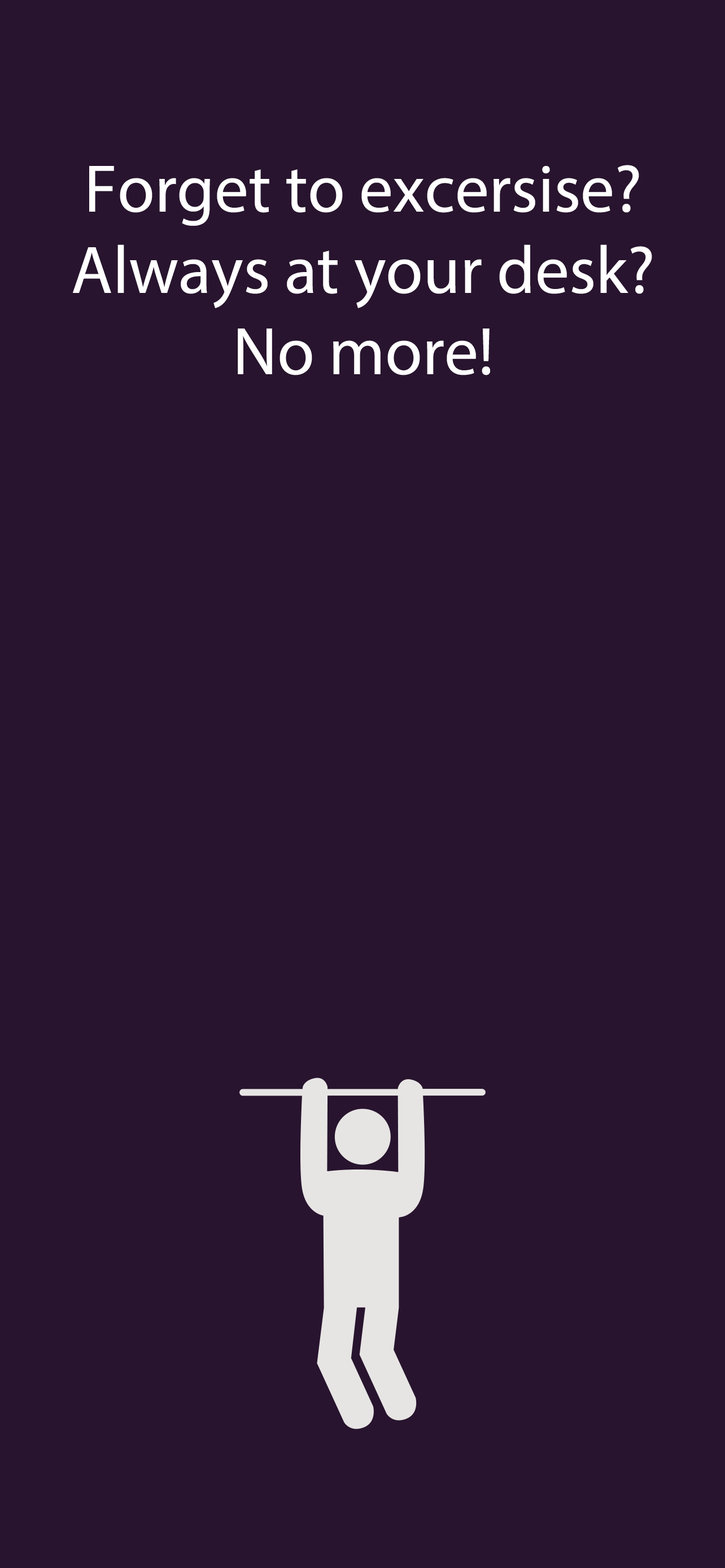
<style>
.page{position:relative;width:725px;height:1568px;background:#28142e}
.page>*{position:absolute;margin:0}
.t1{font:67.7px "MyriadPro-Regular";color:#ffffff}
</style>
<div class="page">
<p class="t1" style="left:73px;top:165px;width:579px;height:210px;text-align:center">Forget to excersise?<br>Always at your desk?<br>No more!</p>
</div>
